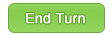
<style>
.page{position:relative;width:112px;height:35px;background:#ffffff}
.page>*{position:absolute;margin:0}
.t1{font:13.7px "Helvetica";color:#ffffff;font-weight:bold}
</style>
<div class="page">
<p class="t1" style="left:26px;top:13px;width:59px;height:11px">End Turn</p>
</div>
